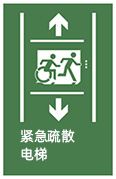
<style>
.page{position:relative;width:116px;height:179px;background:#487c4c}
.page>*{position:absolute;margin:0}
.t1{font:14px/18px "AlibabaPuHuiTiR";color:#ffffff}
</style>
<div class="page">
<p class="t1" style="left:20px;top:129px;width:55px;height:32px">紧急疏散<br>电梯</p>
</div>
